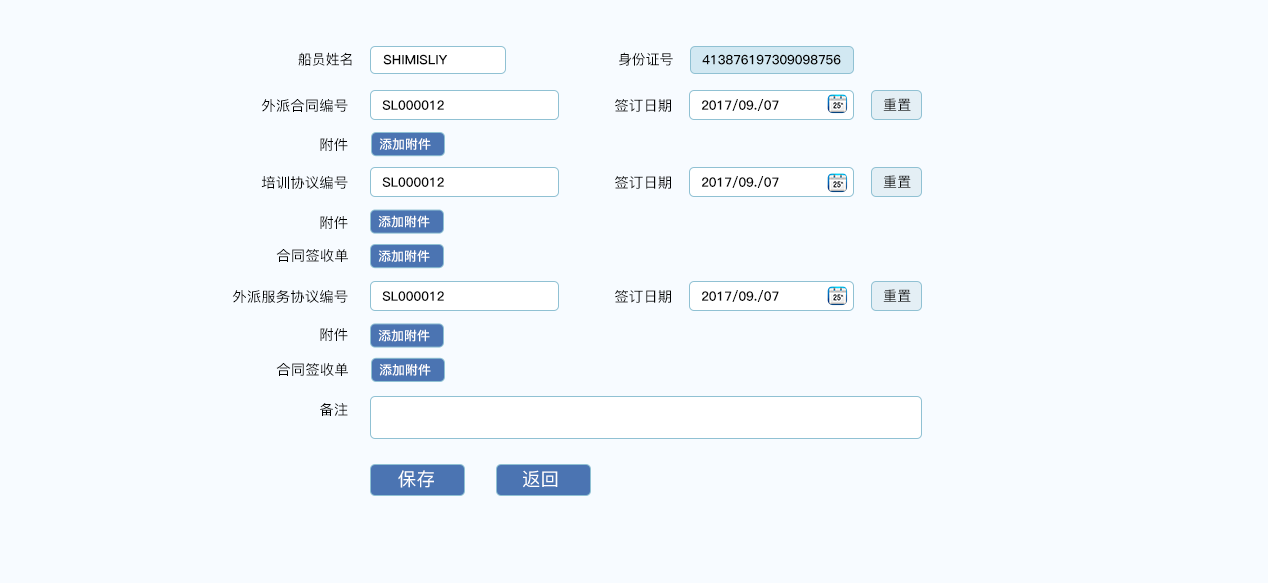
<style>
.page{position:relative;width:1268px;height:583px;background:#f7fbff}
.page>*{position:absolute;margin:0}
.t1{font:14px "PingFang-SC-Medium";color:#050505}
.t2{font:13px "PingFang-SC-Heavy";color:#050505}
.t3{font:14px "PingFang-SC-Medium";color:#020202;scale:1.04 1}
.t4{font:14px "PingFang-SC-Medium";letter-spacing:0.025em;color:#070707}
.t5{font:12.5px "PingFang-SC-Bold";color:#ffffff;scale:1.03 1}
.t6{font:18.6px "PingFang-SC-Medium";color:#ffffff}
</style>
<div class="page">
<p class="t1" style="left:298px;top:52px;width:54px;height:14px">船员姓名</p>
<p class="t2" style="left:383px;top:54px;width:65px;height:11px">SHIMISLIY</p>
<p class="t1" style="left:619px;top:52px;width:54px;height:14px">身份证号</p>
<p class="t2" style="left:702px;top:54px;width:139px;height:11px">413876197309098756</p>
<p class="t3" style="left:261px;top:99px;width:87px;height:13px">外派合同编号</p>
<p class="t2" style="left:382px;top:100px;width:62px;height:10px">SL000012</p>
<p class="t3" style="left:615px;top:99px;width:56px;height:13px">签订日期</p>
<p class="t2" style="left:702px;top:99px;width:77px;height:12px">2017/09./07</p>
<p class="t4" style="left:883px;top:98px;width:28px;height:13px">重置</p>
<p class="t3" style="left:320px;top:138px;width:28px;height:13px">附件</p>
<p class="t5" style="left:379px;top:138px;width:52px;height:12px">添加附件</p>
<p class="t3" style="left:261px;top:176px;width:87px;height:13px">培训协议编号</p>
<p class="t2" style="left:382px;top:177px;width:62px;height:10px">SL000012</p>
<p class="t3" style="left:615px;top:176px;width:56px;height:13px">签订日期</p>
<p class="t2" style="left:702px;top:176px;width:77px;height:12px">2017/09./07</p>
<p class="t4" style="left:883px;top:175px;width:28px;height:13px">重置</p>
<p class="t3" style="left:320px;top:216px;width:28px;height:13px">附件</p>
<p class="t5" style="left:378px;top:215px;width:52px;height:13px">添加附件</p>
<p class="t3" style="left:276px;top:249px;width:72px;height:13px">合同签收单</p>
<p class="t5" style="left:378px;top:250px;width:52px;height:12px">添加附件</p>
<p class="t3" style="left:232px;top:290px;width:116px;height:13px">外派服务协议编号</p>
<p class="t2" style="left:382px;top:291px;width:62px;height:10px">SL000012</p>
<p class="t3" style="left:615px;top:290px;width:56px;height:13px">签订日期</p>
<p class="t2" style="left:702px;top:290px;width:77px;height:12px">2017/09./07</p>
<p class="t4" style="left:883px;top:289px;width:28px;height:13px">重置</p>
<p class="t3" style="left:320px;top:328px;width:28px;height:13px">附件</p>
<p class="t5" style="left:378px;top:329px;width:52px;height:13px">添加附件</p>
<p class="t3" style="left:276px;top:363px;width:72px;height:13px">合同签收单</p>
<p class="t5" style="left:379px;top:364px;width:52px;height:12px">添加附件</p>
<p class="t3" style="left:320px;top:403px;width:28px;height:13px">备注</p>
<p class="t6" style="left:398px;top:470px;width:160px;height:18px">保存              返回</p>
</div>
